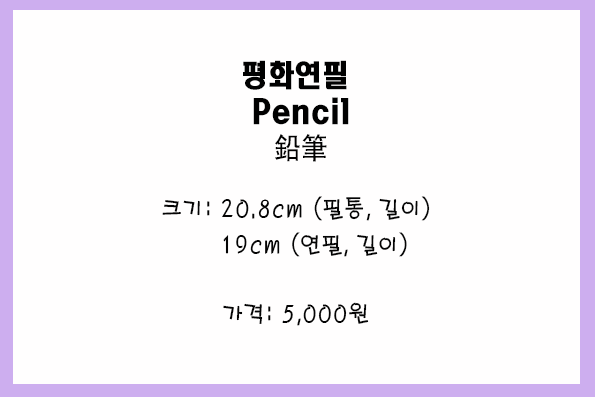
<style>
.page{position:relative;width:595px;height:397px;background:#fffefe}
.page>*{position:absolute;margin:0}
.t1{font:30px/36px "HeadlineR-HM";color:#010101;scale:0.9 1}
.t2{font:30px/36px "AdobeHeitiStd-Regular";color:#010101;scale:0.9 1}
.t3{font:24px/36px "H2porM";color:#040404;scale:0.9 1}
.t4{font:24px "H2porM";color:#040404;scale:0.9 1}
</style>
<div class="page">
<p class="t1" style="left:243px;top:60px;width:106px;height:102px;text-align:center">평화연필 <br>Pencil<br><span class="t2">鉛筆</span></p>
<p class="t3" style="left:162px;top:196px;width:268px;height:61px">크기: 20.8cm (필통, 길이) <br>        19cm (연필, 길이)</p>
<p class="t4" style="left:223px;top:302px;width:146px;height:24px">가격: 5,000원</p>
</div>
